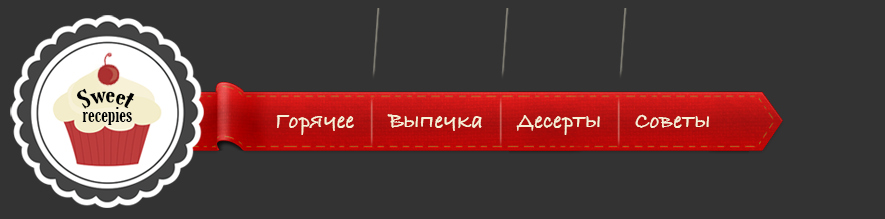
<style>
.page{position:relative;width:885px;height:219px;background:#333333}
.page>*{position:absolute;margin:0}
.t1{font:23.9px "GloucesterMT-ExtraCondensed";color:#000102}
.t2{font:21.5px "GloucesterMT-ExtraCondensed";color:#000102}
.t3{font:23.1px "BradleyHandITCTT-Bold";color:#f7f1d8}
</style>
<div class="page">
<p class="t1" style="left:77px;top:88px;width:58px;height:21px">Sweet</p>
<p class="t2" style="left:82px;top:107px;width:50px;height:18px">recepies</p>
<p class="t3" style="left:276px;top:115px;width:78px;height:20px">Горячее</p>
<p class="t3" style="left:387px;top:114px;width:95px;height:17px">Выпечка</p>
<p class="t3" style="left:516px;top:115px;width:84px;height:20px">Десерты</p>
<p class="t3" style="left:635px;top:114px;width:74px;height:14px">Советы</p>
</div>
